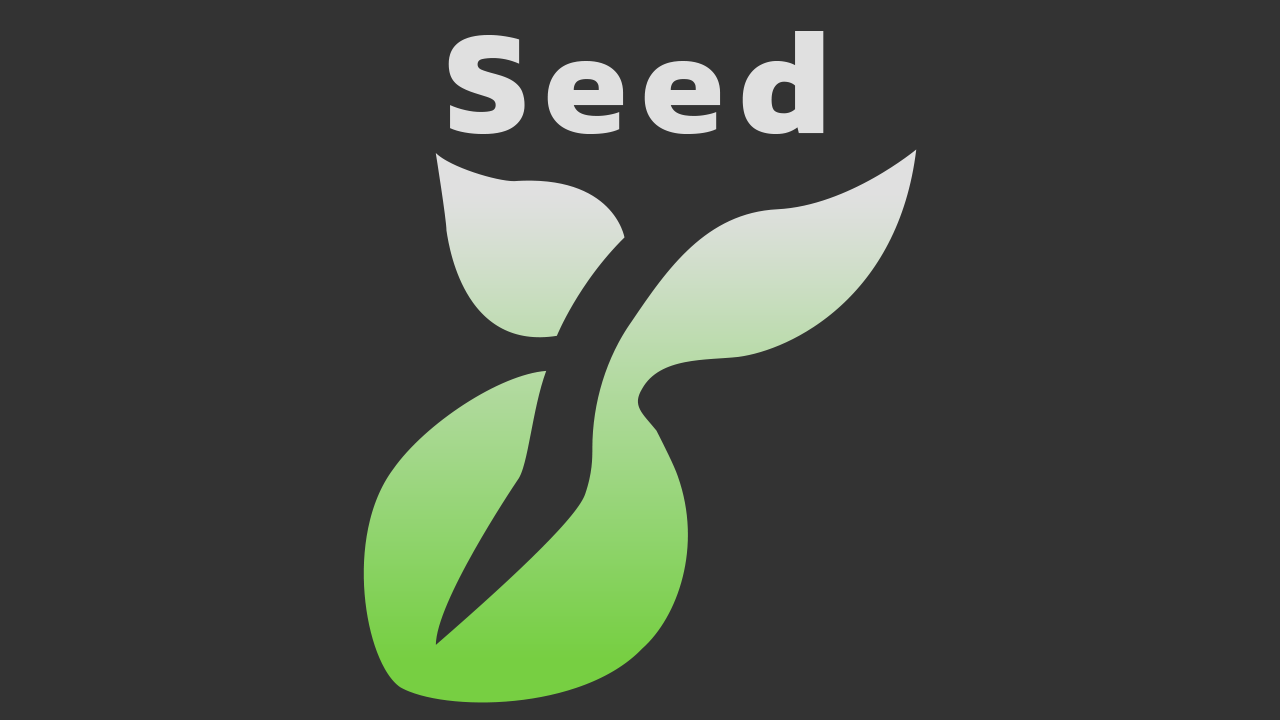
<style>
.page{position:relative;width:1280px;height:720px;background:#333333}
.page>*{position:absolute;margin:0}
.t1{font:150px "Kanit-Bold";letter-spacing:0.1em;color:#e0e0e0}
</style>
<div class="page">
<p class="t1" style="left:448px;top:31px;width:376px;height:103px">Seed</p>
</div>
